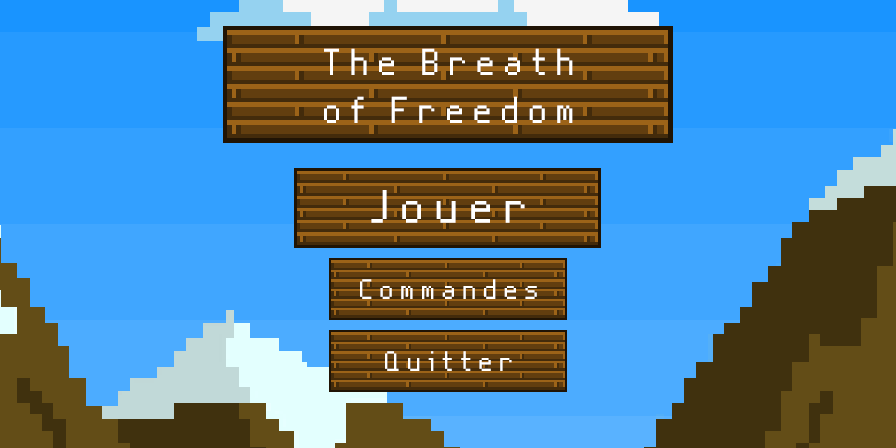
<style>
.page{position:relative;width:896px;height:448px}
.page>*{position:absolute;margin:0}
.t1{font:46.6px/48px "Nine-By-Five-NBP";letter-spacing:0.2em;color:#ffffff;scale:1.03 1}
.t2{font:58.2px "Nine-By-Five-NBP";letter-spacing:0.2em;color:#ffffff;scale:1.03 1}
.t3{font:34.9px "Nine-By-Five-NBP";letter-spacing:0.2em;color:#ffffff;scale:1.03 1}
</style>
<div class="page">
<p class="t1" style="left:324px;top:48px;width:249px;height:75px;text-align:center">The Breath<br>of Freedom</p>
<p class="t2" style="left:371px;top:190px;width:154px;height:33px">Jouer</p>
<p class="t3" style="left:360px;top:279px;width:177px;height:20px">Commandes</p>
<p class="t3" style="left:385px;top:351px;width:127px;height:20px">Quitter</p>
</div>
